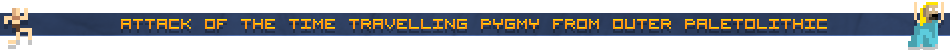
<style>
.page{position:relative;width:950px;height:50px;background:#ffffff}
.page>*{position:absolute;margin:0}
.t1{font:16px "Visitor -BRK-";color:#ff9813;text-transform:uppercase}
</style>
<div class="page">
<p class="t1" style="left:121px;top:19px;width:706px;height:10px">Attack of the TIMe travelling pygmy from outer paletolithic</p>
</div>
